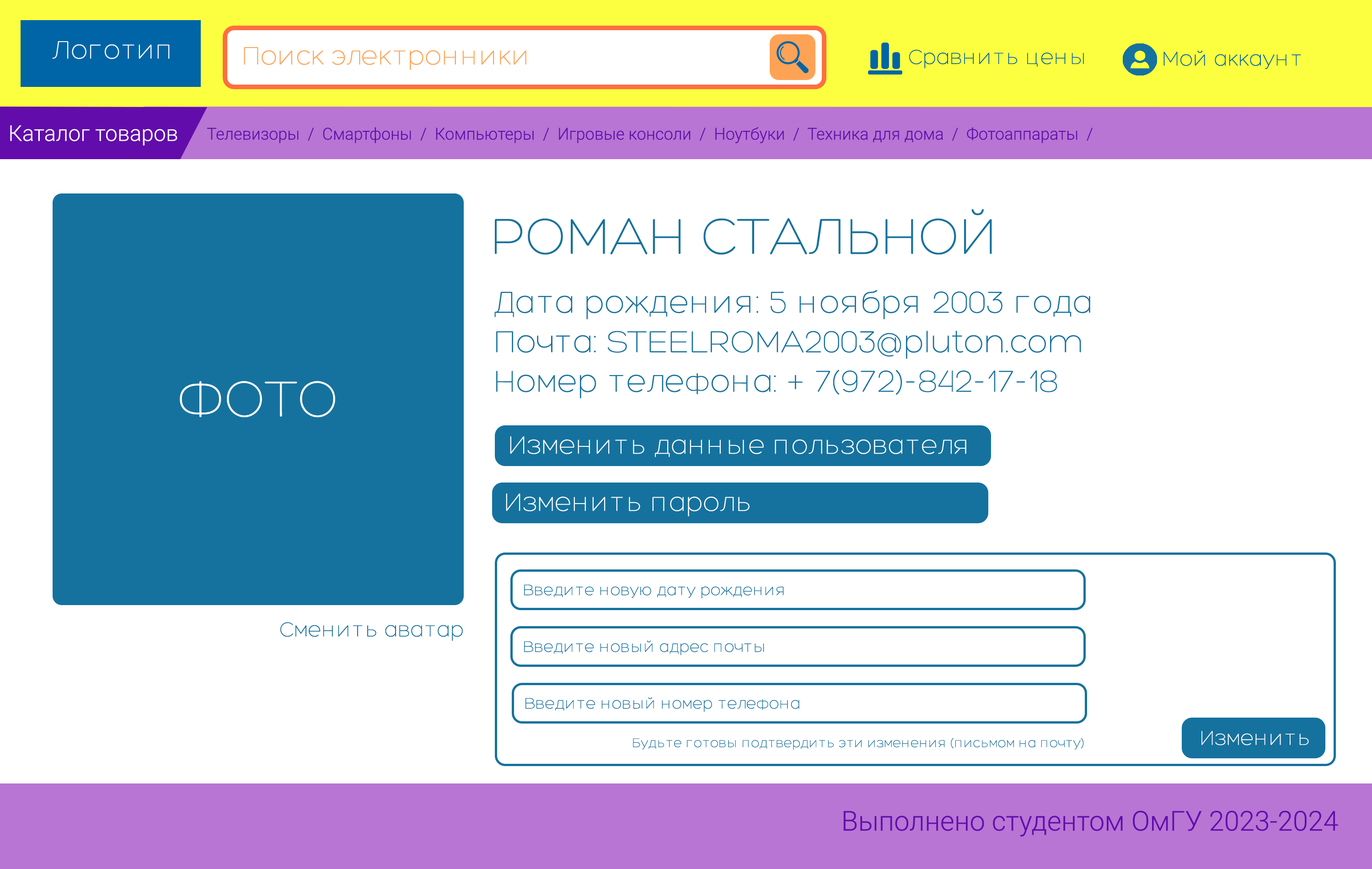
<style>
.page{position:relative;width:1372px;height:869px;background:#ffffff}
.page>*{position:absolute;margin:0}
.t1{font:27.4px "Hero-Light";color:#ffffff}
.t2{font:27.4px "Hero-Light";color:#fea356}
.t3{font:22px "Hero-Light";color:#0065a6}
.t4{font:22px "Roboto-Light";color:#ffffff}
.t5{font:16.5px "Roboto-Light";color:#620cac}
.t6{font:54.9px "Hero-Light";color:#15729e}
.t7{font:32.9px "Hero-Light";color:#15729e}
.t8{font:54.9px "Hero-Light";color:#ffffff}
.t9{font:16.5px "Hero-Light";color:#15729e}
.t10{font:22px "Hero-Light";color:#15729e}
.t11{font:13.7px "Hero-Light";color:#15729e}
.t12{font:22px "Hero-Light";color:#ffffff}
.t13{font:27.4px "Roboto-Light";color:#620cac}
</style>
<div class="page">
<p class="t1" style="left:52px;top:41px;width:118px;height:18px">Логотип</p>
<p class="t2" style="left:244px;top:47px;width:282px;height:23px">Поиск электронники</p>
<p class="t3" style="left:909px;top:49px;width:175px;height:20px">Сравнить цены</p>
<p class="t3" style="left:1164px;top:50px;width:137px;height:19px">Мой аккаунт</p>
<p class="t4" style="left:10px;top:125px;width:167px;height:20px">Каталог товаров</p>
<p class="t5" style="left:207px;top:127px;width:886px;height:16px">Телевизоры  /  Смартфоны  /  Компьютеры  /  Игровые консоли  /  Ноутбуки  /  Техника для дома  /  Фотоаппараты  /</p>
<p class="t6" style="left:495px;top:209px;width:497px;height:46px">РОМАН СТАЛЬНОЙ</p>
<p class="t7" style="left:494px;top:290px;width:596px;height:108px">Дата рождения: 5 ноября 2003 года<br>Почта: STEELROMA2003@pluton.com<br>Номер телефона: + 7(972)-842-17-18</p>
<p class="t8" style="left:180px;top:381px;width:155px;height:37px">ФОТО</p>
<p class="t1" style="left:510px;top:436px;width:456px;height:21px">Изменить данные пользователя</p>
<p class="t1" style="left:506px;top:493px;width:244px;height:24px">Изменить пароль</p>
<p class="t9" style="left:524px;top:585px;width:260px;height:14px">Введите новую дату рождения</p>
<p class="t10" style="left:280px;top:622px;width:183px;height:19px">Сменить аватар</p>
<p class="t9" style="left:524px;top:640px;width:240px;height:15px">Введите новый адрес почты</p>
<p class="t9" style="left:526px;top:697px;width:274px;height:15px">Введите новый номер телефона</p>
<p class="t11" style="left:633px;top:738px;width:451px;height:12px">Будьте готовы подтвердить эти изменения (письмом на почту)</p>
<p class="t12" style="left:1202px;top:731px;width:107px;height:15px">Изменить</p>
<p class="t13" style="left:843px;top:810px;width:495px;height:27px">Выполнено студентом ОмГУ 2023-2024</p>
</div>
